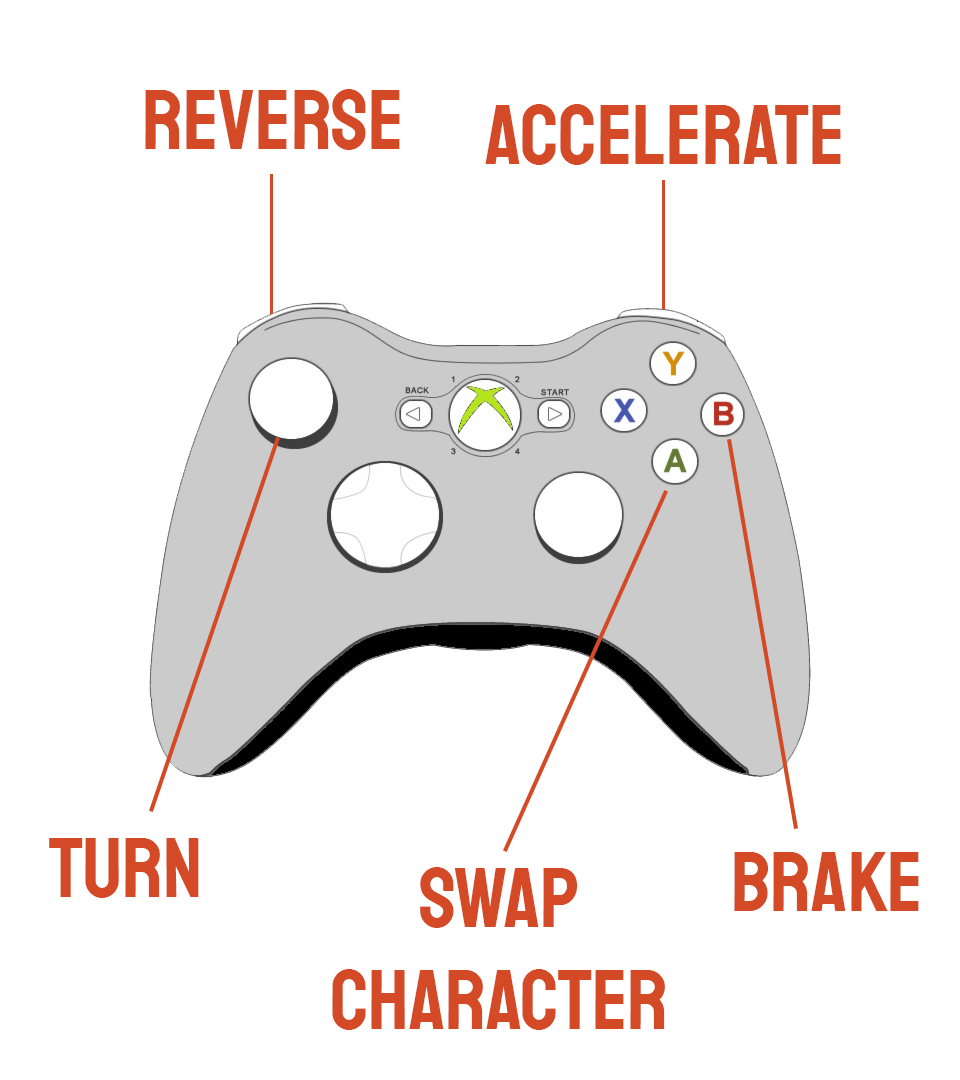
<style>
.page{position:relative;width:960px;height:1080px;background:#ffffff}
.page>*{position:absolute;margin:0}
.t1{font:84.9px "Staatliches-Regular";color:#d44a26}
</style>
<div class="page">
<p class="t1" style="left:145px;top:89px;width:255px;height:61px">Reverse</p>
<p class="t1" style="left:485px;top:104px;width:356px;height:61px">Accelerate</p>
<p class="t1" style="left:49px;top:838px;width:150px;height:60px">Turn</p>
<p class="t1" style="left:734px;top:852px;width:185px;height:59px">Brake</p>
<p class="t1" style="left:332px;top:867px;width:333px;height:163px;text-align:center">Swap<br>Character</p>
</div>
